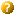
<style>
.page{position:relative;width:16px;height:16px;background:#ffffff}
.page>*{position:absolute;margin:0}
.t1{font:11px "Verdana";color:#ffffff;font-weight:bold}
</style>
<div class="page">
<p class="t1" style="left:5px;top:3px;width:5px;height:9px">?</p>
</div>
